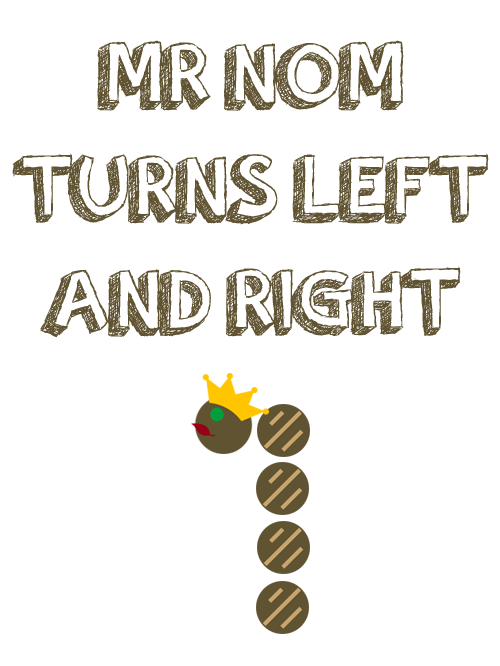
<style>
.page{position:relative;width:500px;height:666px;background:#ffffff}
.page>*{position:absolute;margin:0}
.t1{font:94px "orangejuice";color:#605332}
</style>
<div class="page">
<p class="t1" style="left:12px;top:40px;width:477px;height:298px;text-align:center">MR NOM<br>TURNS LEFT<br>AND RIGHT</p>
</div>
